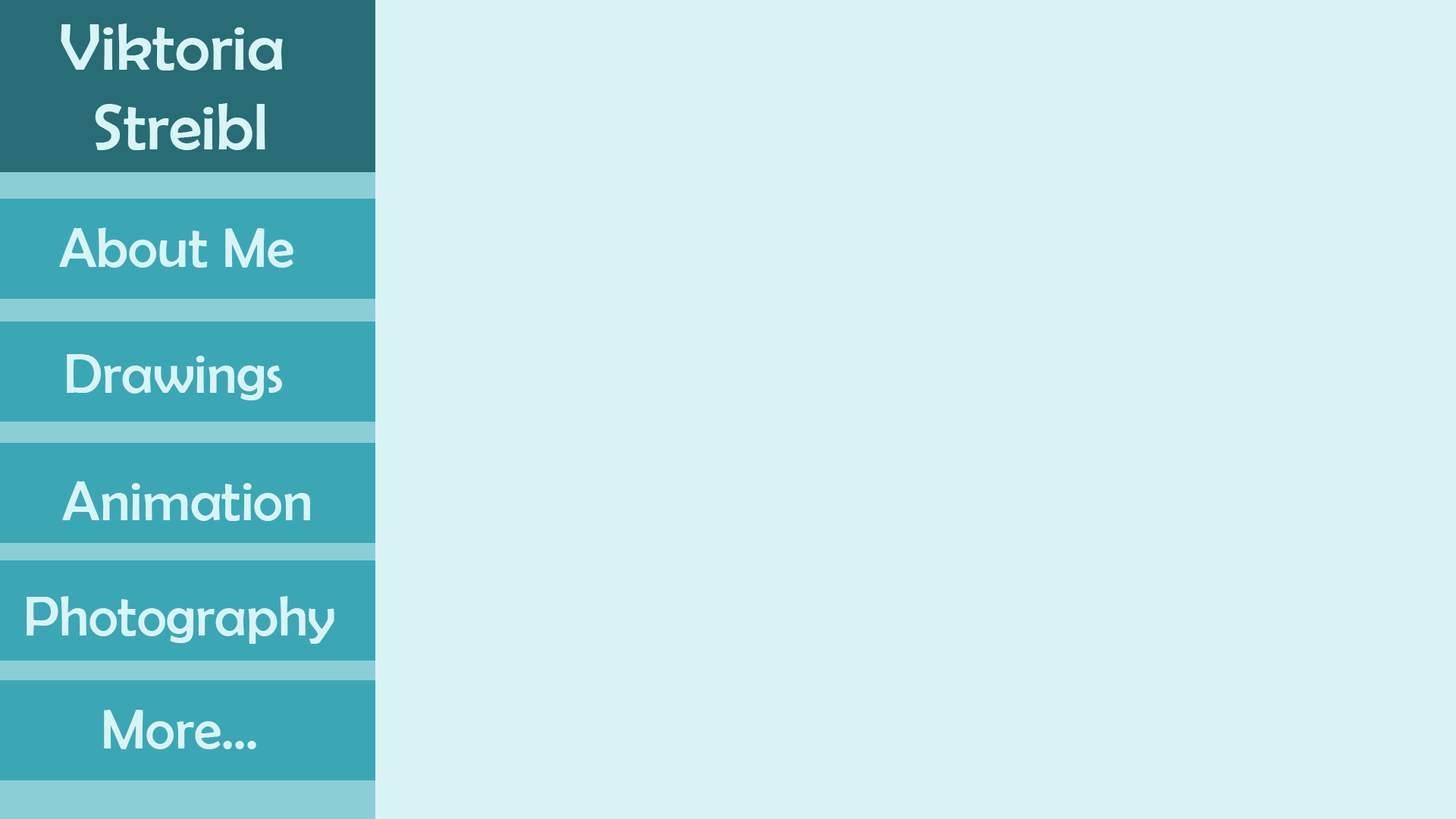
<style>
.page{position:relative;width:1456px;height:819px;background:#d9f4f7}
.page>*{position:absolute;margin:0}
.t1{font:66.3px "BerlinSansFB-Reg";color:#d9f4f7}
.t2{font:56.9px "BerlinSansFB-Reg";color:#d9f4f7}
</style>
<div class="page">
<p class="t1" style="left:61px;top:24px;width:222px;height:126px;text-align:center">Viktoria <br>Streibl</p>
<p class="t2" style="left:59px;top:227px;width:234px;height:41px">About Me</p>
<p class="t2" style="left:67px;top:354px;width:215px;height:46px">Drawings</p>
<p class="t2" style="left:62px;top:481px;width:248px;height:40px">Animation</p>
<p class="t2" style="left:27px;top:596px;width:307px;height:48px">Photography</p>
<p class="t2" style="left:104px;top:710px;width:152px;height:39px">More...</p>
</div>
